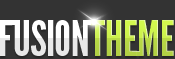
<style>
.page{position:relative;width:175px;height:59px;background:#333333}
.page>*{position:absolute;margin:0}
.t1{font:48px "LeagueGothic";color:#ffffff}
.t2{font:48px "LeagueGothic";color:#c3e54b}
</style>
<div class="page">
<p class="t1" style="left:0px;top:20px;width:88px;height:36px">FUSION</p>
<p class="t2" style="left:90px;top:20px;width:84px;height:36px">THEME</p>
</div>
